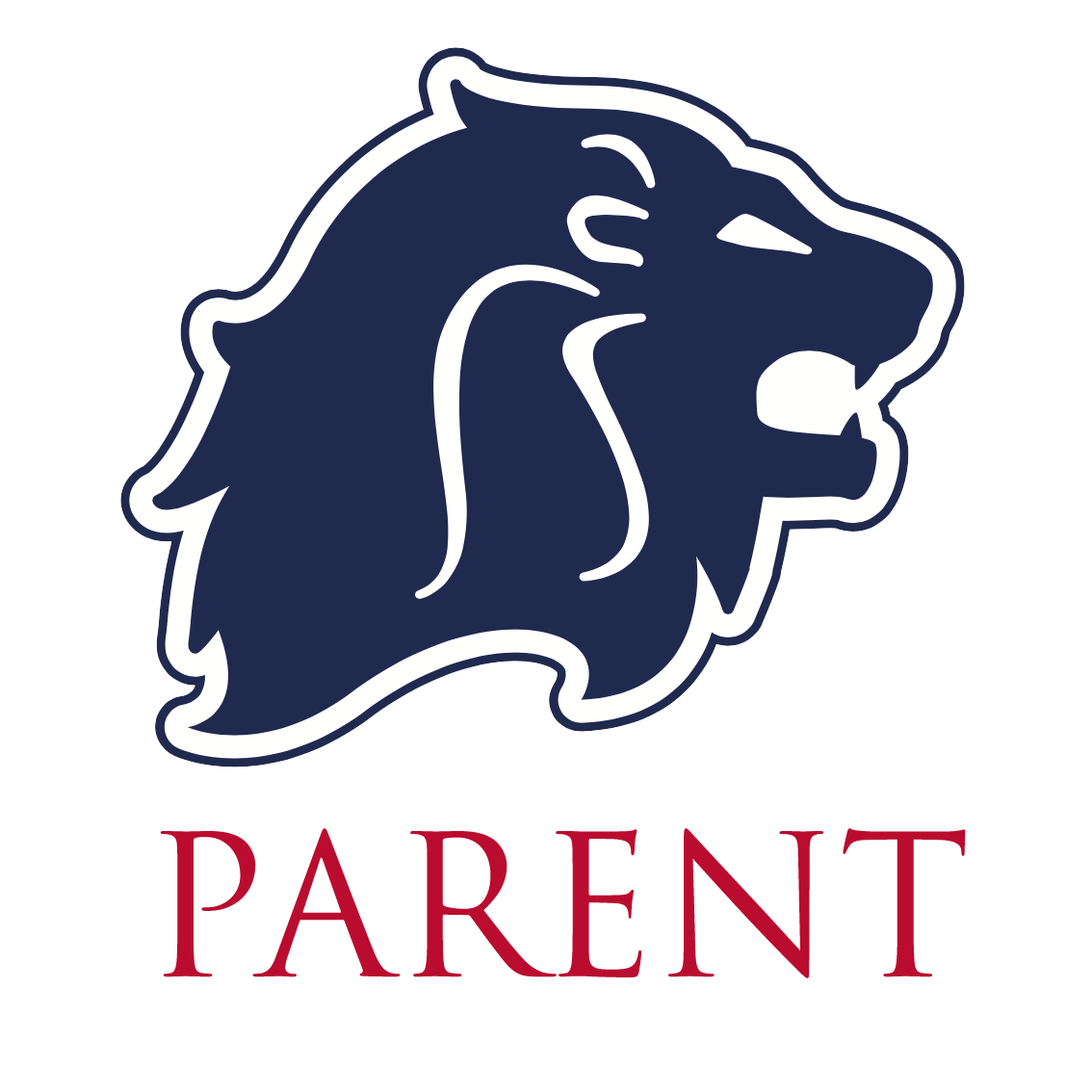
<style>
.page{position:relative;width:1092px;height:1092px;background:#ffffff}
.page>*{position:absolute;margin:0}
.t1{font:192.6px "TrajanPro-Regular";color:#ba0c2f}
</style>
<div class="page">
<p class="t1" style="left:160px;top:828px;width:806px;height:150px">PARENT</p>
</div>
